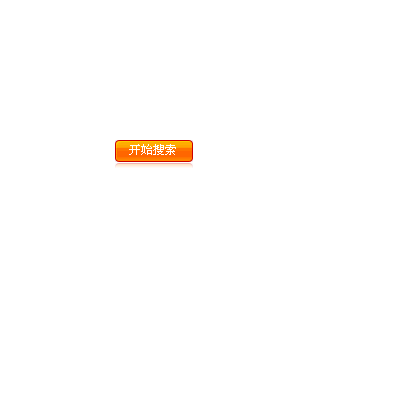
<style>
.page{position:relative;width:400px;height:400px;background:#ffffff}
.page>*{position:absolute;margin:0}
.t1{font:12px "SimSun";color:#ffffff}
</style>
<div class="page">
<p class="t1" style="left:129px;top:144px;width:47px;height:11px">开始搜索</p>
</div>
